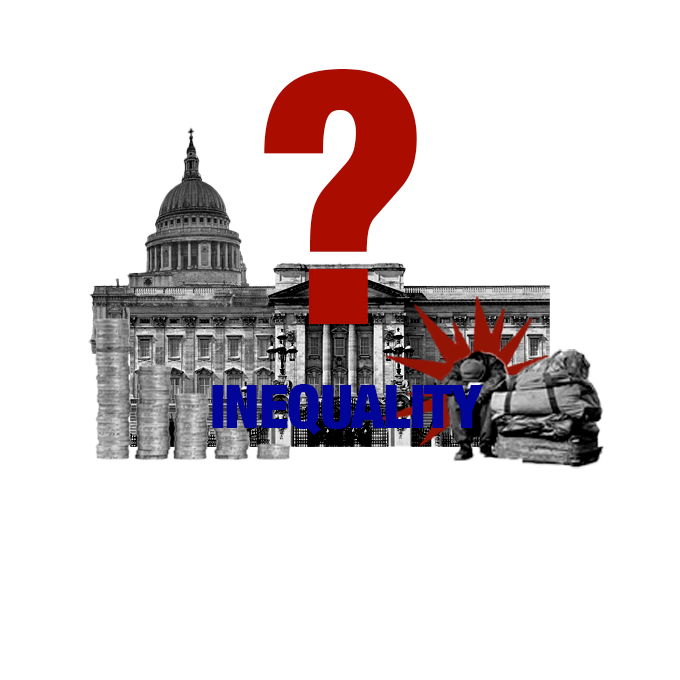
<style>
.page{position:relative;width:680px;height:680px;background:#ffffff}
.page>*{position:absolute;margin:0}
.t1{font:349.9px "HelveticaNeue-CondensedBlack";letter-spacing:-0.02em;color:#ab0c00}
.t2{font:60px "HelveticaNeue-CondensedBlack";letter-spacing:-0.02em;color:#020698}
</style>
<div class="page">
<p class="t1" style="left:264px;top:69px;width:153px;height:255px">?</p>
<p class="t2" style="left:212px;top:384px;width:272px;height:51px">INEQUALITY</p>
</div>
